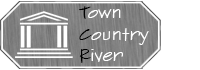
<style>
.page{position:relative;width:200px;height:70px;background:#ffffff}
.page>*{position:absolute;margin:0}
.t1{font:18px "SketchFlowPrint";color:#ffffff}
.t2{font:18px "SketchFlowPrint";color:#000000}
</style>
<div class="page">
<p class="t1" style="left:78px;top:6px;width:71px;height:57px"><span class="t2">T</span>own<br><span class="t2">C</span>ountry<br><span class="t2">R</span>iver</p>
</div>
